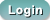
<style>
.page{position:relative;width:50px;height:20px}
.page>*{position:absolute;margin:0}
.t1{font:12px "Arial-BoldMT";letter-spacing:0.04em;color:#ffffff}
</style>
<div class="page">
<p class="t1" style="left:8px;top:5px;width:34px;height:12px">Login</p>
</div>
